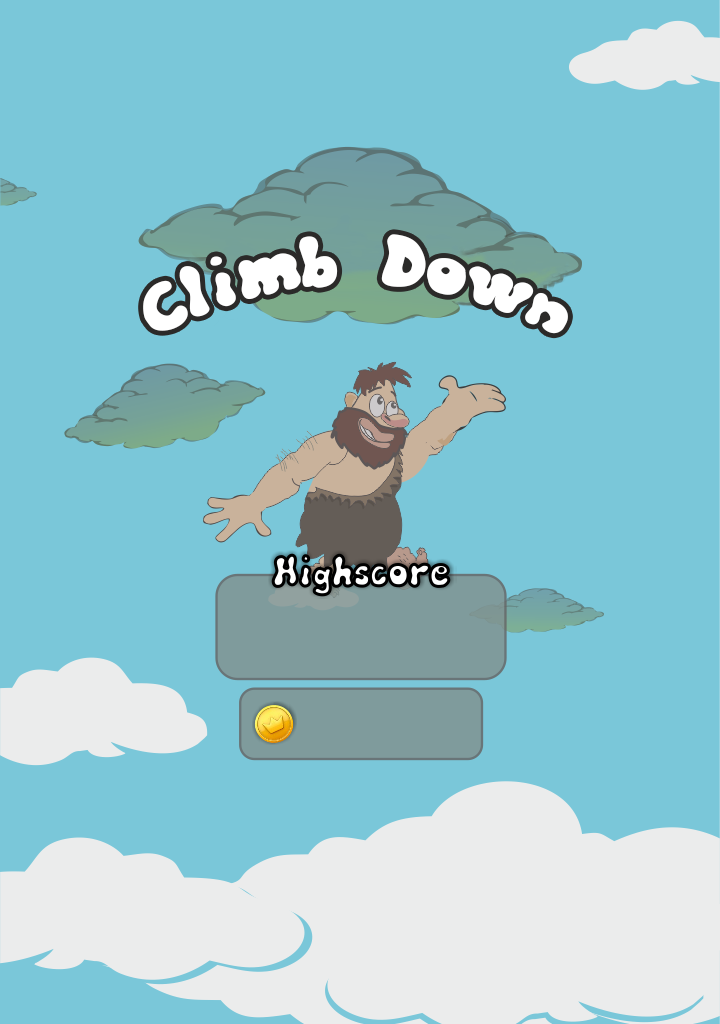
<style>
.page{position:relative;width:720px;height:1024px;background:#7ac7d9}
.page>*{position:absolute;margin:0}
.t1{font:71px "Blow";color:#ffffff}
</style>
<div class="page">
<p class="t1" style="left:143px;top:234px;width:425px;height:100px">Climb Down</p>
</div>
